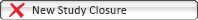
<style>
.page{position:relative;width:198px;height:20px;background:#ffffff}
.page>*{position:absolute;margin:0}
.t1{font:12.4px "Calibri";color:#333333}
</style>
<div class="page">
<p class="t1" style="left:32px;top:6px;width:95px;height:10px">New Study Closure</p>
</div>
